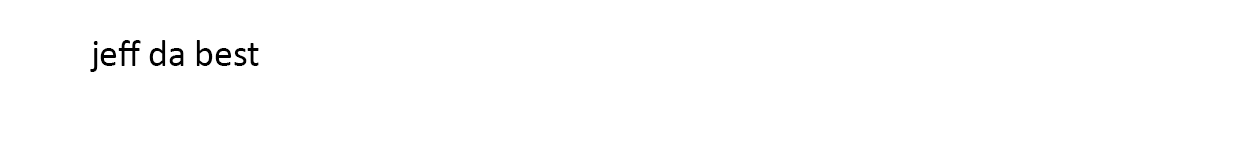
<style>
.page{position:relative;width:1236px;height:150px;background:#ffffff}
.page>*{position:absolute;margin:0}
.t1{font:37.5px "Calibri";color:#000000}
</style>
<div class="page">
<p class="t1" style="left:90px;top:40px;width:169px;height:32px">jeff da best</p>
</div>
